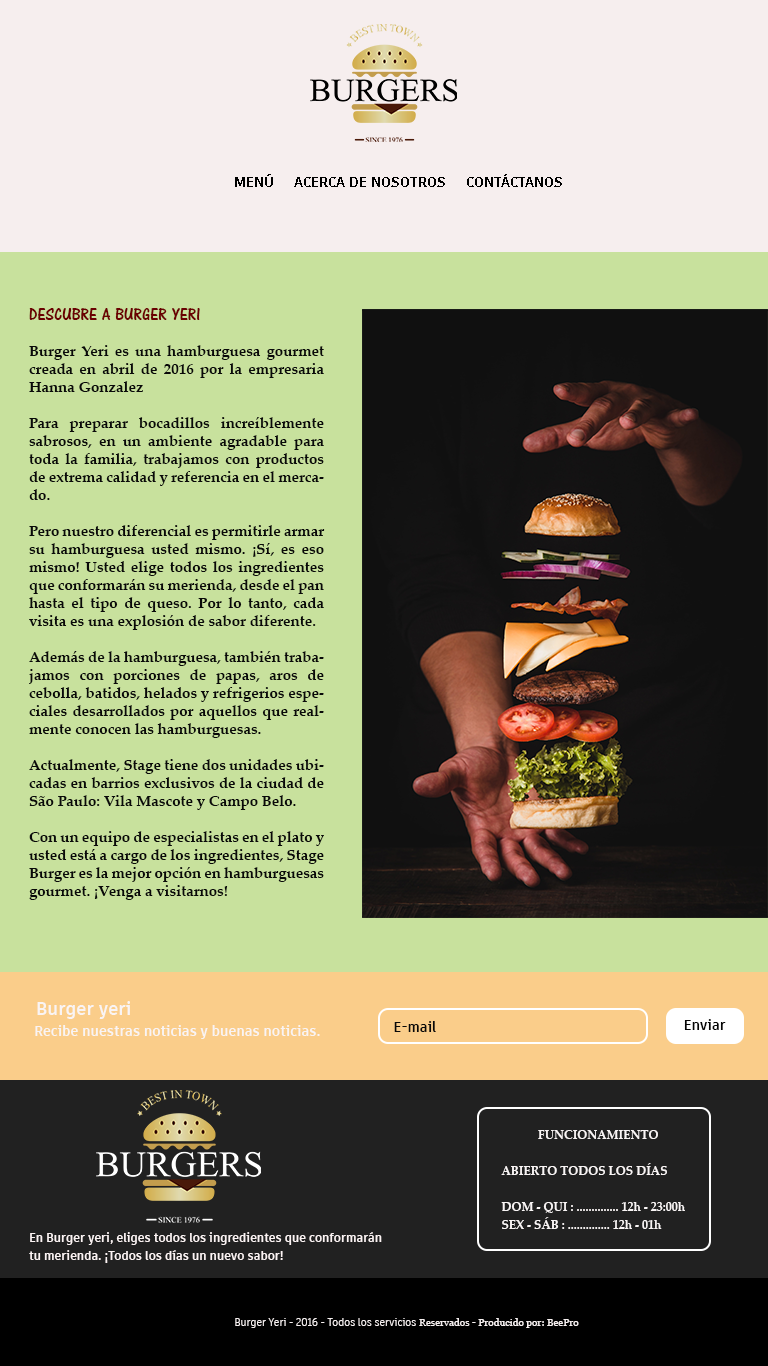
<style>
.page{position:relative;width:768px;height:1366px;background:#c8e19d}
.page>*{position:absolute;margin:0}
.t1{font:14px "ArtifaktElement-Bold";color:#000000}
.t2{font:15px/18px "PalatinoLinotype-Bold";color:#090909}
.t3{font:18px/18px "ARCENA";color:#6a0101}
.t4{font:18px "ArtifaktElement-Bold";color:#f9f4f4}
.t5{font:14px "ArtifaktElement-Bold";color:#f9f4f4}
.t6{font:14px "ArtifaktElement-Bold";color:#090909}
.t7{font:14px "ArtifaktElement-Bold";color:#050505}
.t8{font:12px/18px "PalatinoLinotype-Bold";color:#f9f5f5}
.t9{font:12px/18px "ArtifaktElement-Bold";color:#fcf4f4}
.t10{font:10px "ArtifaktElement-Regular";color:#f6f0f0}
.t11{font:10px "Georgia";color:#f6f0f0}
.t12{font:10px "Georgia";color:#f8f2f2}
</style>
<div class="page">
<p class="t1" style="left:235px;top:174px;width:327px;height:13px">MENÚ     ACERCA DE NOSOTROS     CONTÁCTANOS</p>
<p class="t2" style="left:29px;top:308px;width:296px;height:592px"><span class="t3">DESCUBRE A BURGER YERI<br></span><br>Burger Yeri es una hamburguesa gourmet creada en abril de 2016 por la empresaria Hanna Gonzalez<br><br>Para preparar bocadillos increíblemente sabrosos, en un ambiente agradable para toda la familia, trabajamos con productos de extrema calidad y referencia en el mercado.<br><br>Pero nuestro diferencial es permitirle armar su hamburguesa usted mismo. ¡Sí, es eso mismo! Usted elige todos los ingredientes que conformarán su merienda, desde el pan hasta el tipo de queso. Por lo tanto, cada visita es una explosión de sabor diferente.<br><br>Además de la hamburguesa, también trabajamos con porciones de papas, aros de cebolla, batidos, helados y refrigerios especiales desarrollados por aquellos que realmente conocen las hamburguesas.<br><br>Actualmente, Stage tiene dos unidades ubicadas en barrios exclusivos de la ciudad de São Paulo: Vila Mascote y Campo Belo.<br><br>Con un equipo de especialistas en el plato y usted está a cargo de los ingredientes, Stage Burger es la mejor opción en hamburguesas gourmet. ¡Venga a visitarnos!</p>
<p class="t4" style="left:37px;top:1001px;width:93px;height:18px">Burger yeri</p>
<p class="t5" style="left:35px;top:1025px;width:285px;height:14px">Recibe nuestras noticias y buenas noticias.</p>
<p class="t6" style="left:394px;top:1021px;width:42px;height:11px">E-mail</p>
<p class="t7" style="left:684px;top:1019px;width:42px;height:11px">Enviar</p>
<p class="t8" style="left:501px;top:1130px;width:184px;height:99px;text-align:center">FUNCIONAMIENTO<br><br>ABIERTO TODOS LOS DÍAS<br><br>DOM - QUI : .............. 12h - 23:00h<br>SEX - SÁB : .............. 12h - 01h</p>
<p class="t9" style="left:29px;top:1232px;width:353px;height:31px">En Burger yeri, eliges todos los ingredientes que conformarán tu merienda. ¡Todos los días un nuevo sabor!</p>
<p class="t10" style="left:235px;top:1318px;width:344px;height:10px">Burger Yeri - 2016 - Todos los servicios <span class="t11">Reservados -</span><span class="t12"> Producido por: BeePro</span></p>
</div>
